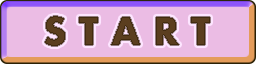
<style>
.page{position:relative;width:256px;height:64px;background:#ebbce4}
.page>*{position:absolute;margin:0}
.t1{font:36.9px "Futura-Bold";letter-spacing:0.32em;color:#5b3e1f}
</style>
<div class="page">
<p class="t1" style="left:45px;top:16px;width:165px;height:30px">START</p>
</div>
